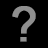
<style>
.page{position:relative;width:48px;height:48px;background:#000000}
.page>*{position:absolute;margin:0}
.t1{font:48px "ArialMT";letter-spacing:0.2em;color:#8f8f8f;font-weight:bold}
</style>
<div class="page">
<p class="t1" style="left:12px;top:6px;width:24px;height:36px">?</p>
</div>
